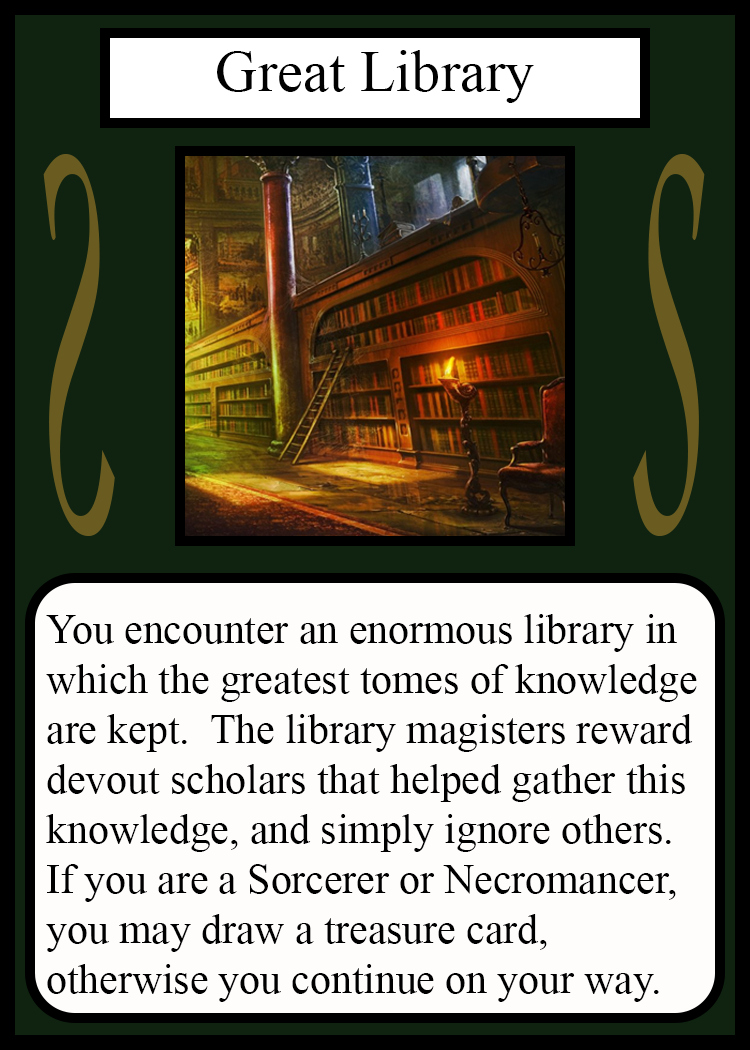
<style>
.page{position:relative;width:750px;height:1050px;background:#fffcfc}
.page>*{position:absolute;margin:0}
.t1{font:58.3px "TimesNewRomanPSMT";color:#010101}
.t2{font:548.5px "Apple-Chancery";color:#6a5c21;scale:0.27 1}
.t3{font:548.2px "Apple-Chancery";color:#6a5c21;scale:0.27 1}
.t4{font:41.7px "TimesNewRomanPSMT";color:#000000}
</style>
<div class="page">
<p class="t1" style="left:217px;top:50px;width:317px;height:53px">Great Library</p>
<p class="t2" style="left:43px;top:154px;width:72px;height:382px;rotate:180deg">S</p>
<p class="t3" style="left:633px;top:154px;width:72px;height:382px">S</p>
<p class="t4" style="left:46px;top:614px;width:651px;height:388px">You encounter an enormous library in<br>which the greatest tomes of knowledge<br>are kept.  The library magisters reward<br>devout scholars that helped gather this<br>knowledge, and simply ignore others.<br>If you are a Sorcerer or Necromancer,<br>you may draw a treasure card,<br>otherwise you continue on your way.</p>
</div>
